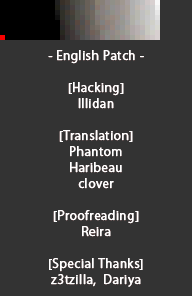
<style>
.page{position:relative;width:192px;height:296px;background:#333333}
.page>*{position:absolute;margin:0}
.t1{font:12px/16px "KozGoPr6N-Regular";letter-spacing:0.025em;color:#ffffff;font-weight:bold}
</style>
<div class="page">
<p class="t1" style="left:48px;top:50px;width:96px;height:237px;text-align:center">- English Patch -<br><br>[Hacking]<br>Illidan<br><br>[Translation]<br>Phantom<br>Haribeau<br>clover<br><br>[Proofreading]<br>Reira<br><br>[Special Thanks]<br>z3tzilla,  Dariya</p>
</div>
